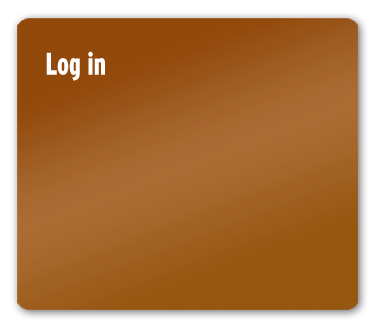
<style>
.page{position:relative;width:375px;height:331px}
.page>*{position:absolute;margin:0}
.t1{font:31.5px "Interstate-BlackCondensed";color:#ffffff;scale:0.81 1}
</style>
<div class="page">
<p class="t1" style="left:46px;top:51px;width:59px;height:30px">Log in</p>
</div>
